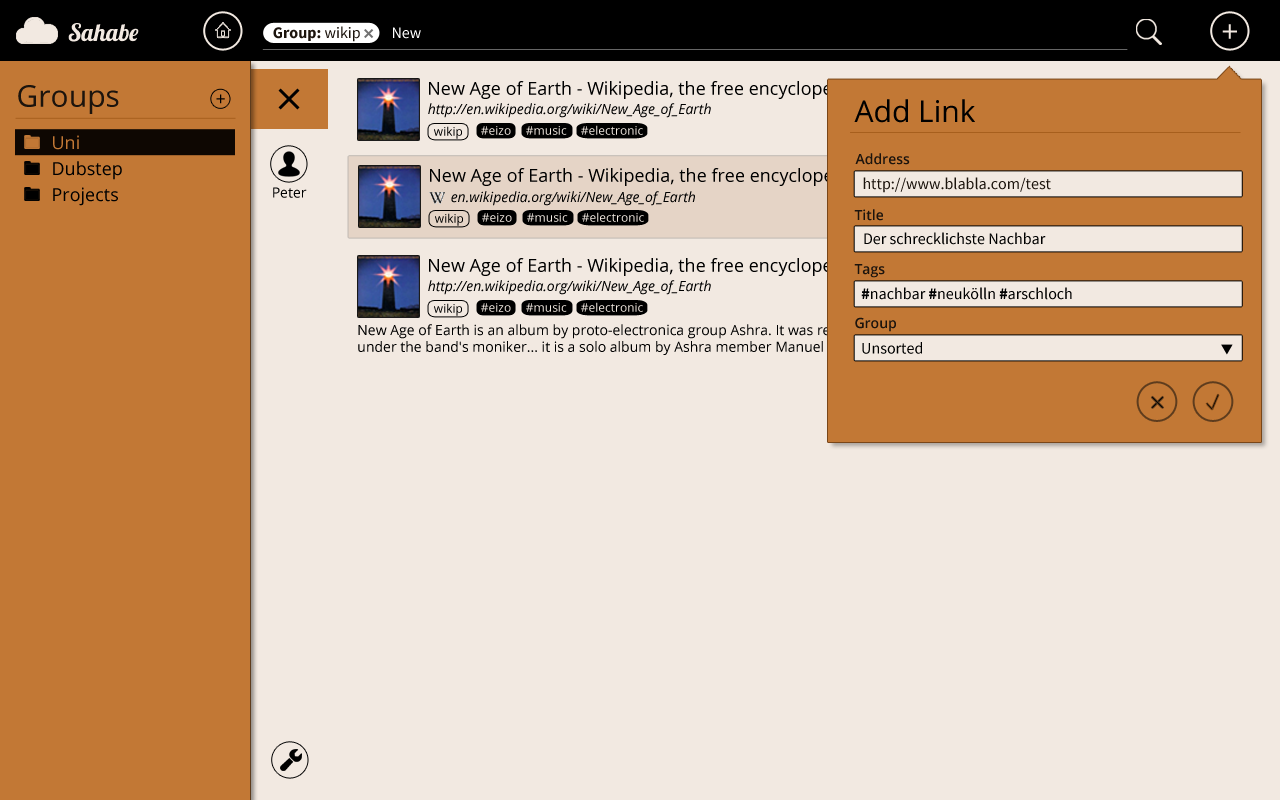
<style>
.page{position:relative;width:1280px;height:800px;background:#f2e9e1}
.page>*{position:absolute;margin:0}
.t1{font:24px "Lobster";color:#f2e9e1}
.t2{font:16px "SourceSansPro-Bold";color:#1c140d}
.t3{font:16px "SourceSansPro-Regular";color:#1c140d}
.t4{font:16px "SourceSansPro-Regular";color:#ffffff}
.t5{font:30px "OpenSans";color:#f2e9e1}
.t6{font:30px "OpenSans";color:#1c140d}
.t7{font:18px "OpenSans";color:#000000}
.t8{font:18px "OpenSans";color:#010101}
.t9{font:30px "OpenSans";color:#000000}
.t10{font:14px "OpenSans-Italic";color:#000000}
.t11{font:12px "OpenSans";color:#000000}
.t12{font:12px "OpenSans"}
.t13{font:12px "OpenSans";color:#f2e9e1}
.t14{font:18px "OpenSans";color:#c27835}
.t15{font:14px "OpenSans-Semibold";color:#1c140d}
.t16{font:14px "OpenSans";color:#000000}
.t17{font:16px "SourceSansPro-Regular";color:#000000}
.t18{font:16px "SourceSansPro-Bold";color:#000000}
</style>
<div class="page">
<p class="t1" style="left:68px;top:23px;width:71px;height:19px">Sahabe</p>
<p class="t2" style="left:273px;top:26px;width:87px;height:16px">Group: <span class="t3">wikip</span></p>
<p class="t4" style="left:393px;top:27px;width:28px;height:12px">New</p>
<p class="t5" style="left:1222px;top:24px;width:15px;height:15px">+</p>
<p class="t6" style="left:18px;top:85px;width:101px;height:29px">Groups</p>
<p class="t7" style="left:429px;top:81px;width:428px;height:18px">New Age of Earth - Wikipedia, the free encyclopedia</p>
<p class="t8" style="left:216px;top:94px;width:9px;height:10px">+</p>
<p class="t9" style="left:854px;top:99px;width:121px;height:24px">Add Link</p>
<p class="t10" style="left:428px;top:103px;width:283px;height:15px">http://en.wikipedia.org/wiki/New_Age_of_Earth</p>
<p class="t11" style="left:434px;top:126px;width:28px;height:13px">wikip</p>
<p class="t12" style="left:481px;top:126px;width:30px;height:9px">#eizo</p>
<p class="t13" style="left:526px;top:126px;width:41px;height:9px">#music</p>
<p class="t13" style="left:581px;top:125px;width:62px;height:10px">#electronic</p>
<p class="t14" style="left:53px;top:135px;width:26px;height:15px">Uni</p>
<p class="t7" style="left:53px;top:161px;width:69px;height:19px">Dubstep</p>
<p class="t15" style="left:855px;top:153px;width:55px;height:12px">Address</p>
<p class="t7" style="left:430px;top:168px;width:428px;height:18px">New Age of Earth - Wikipedia, the free encyclopedia</p>
<p class="t3" style="left:863px;top:177px;width:188px;height:16px">http://www.blabla.com/test</p>
<p class="t7" style="left:53px;top:187px;width:65px;height:19px">Projects</p>
<p class="t16" style="left:273px;top:187px;width:34px;height:11px">Peter</p>
<p class="t10" style="left:451px;top:191px;width:244px;height:15px">en.wikipedia.org/wiki/New_Age_of_Earth</p>
<p class="t15" style="left:854px;top:209px;width:29px;height:12px">Title</p>
<p class="t11" style="left:435px;top:213px;width:28px;height:13px">wikip</p>
<p class="t12" style="left:482px;top:213px;width:30px;height:9px">#eizo</p>
<p class="t13" style="left:527px;top:213px;width:41px;height:9px">#music</p>
<p class="t13" style="left:582px;top:212px;width:62px;height:10px">#electronic</p>
<p class="t17" style="left:864px;top:232px;width:182px;height:13px">Der schrecklichste Nachbar</p>
<p class="t7" style="left:429px;top:258px;width:428px;height:18px">New Age of Earth - Wikipedia, the free encyclopedia</p>
<p class="t15" style="left:854px;top:264px;width:31px;height:14px">Tags</p>
<p class="t10" style="left:428px;top:280px;width:283px;height:15px">http://en.wikipedia.org/wiki/New_Age_of_Earth</p>
<p class="t17" style="left:861px;top:287px;width:211px;height:13px"><span class="t18">#</span>nachbar <span class="t18">#</span>neukölln <span class="t18">#</span>arschloch</p>
<p class="t11" style="left:434px;top:303px;width:28px;height:13px">wikip</p>
<p class="t12" style="left:481px;top:303px;width:30px;height:9px">#eizo</p>
<p class="t13" style="left:526px;top:303px;width:41px;height:9px">#music</p>
<p class="t13" style="left:581px;top:302px;width:62px;height:10px">#electronic</p>
<p class="t15" style="left:855px;top:317px;width:41px;height:15px">Group</p>
<p class="t16" style="left:358px;top:324px;width:826px;height:31px">New Age of Earth is an album by proto-electronica group Ashra. It was released in 1976 on Isadora Records. Altfhough released under the band's moniker... it is a solo album by Ashra member Manuel Göttsching.</p>
<p class="t17" style="left:862px;top:342px;width:60px;height:12px">Unsorted</p>
</div>
